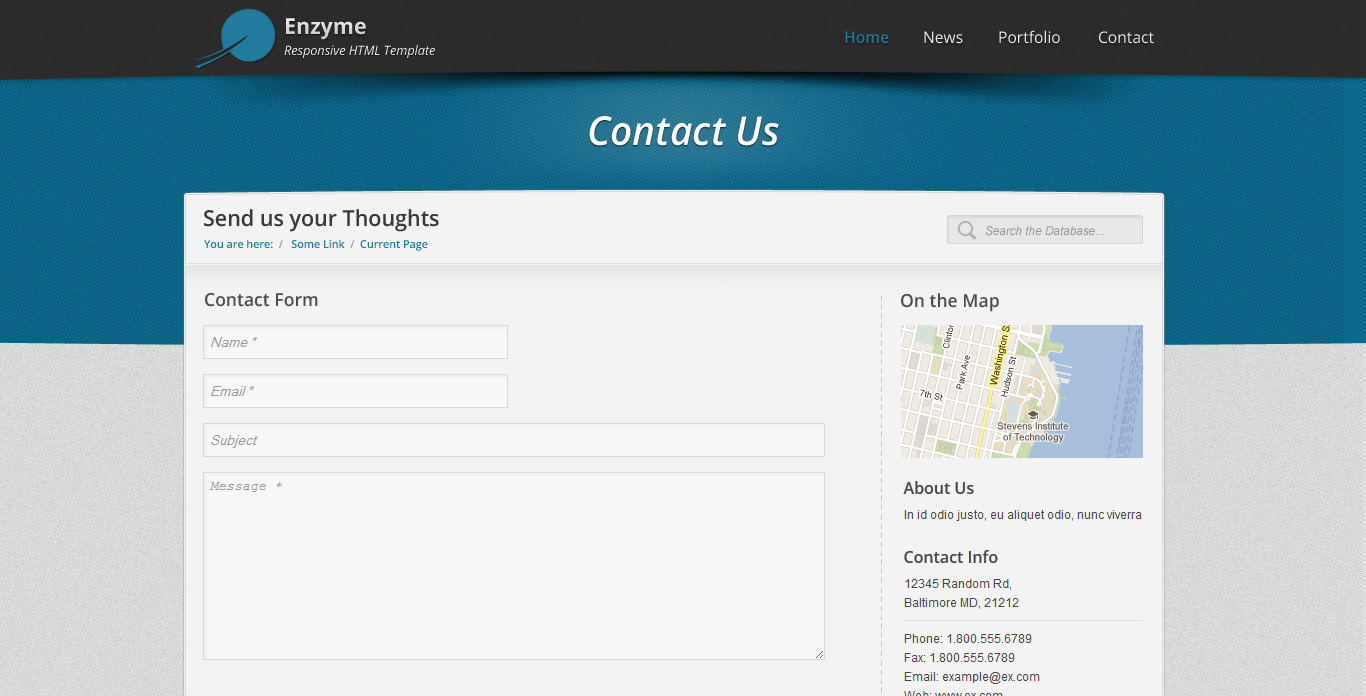
<style>
.page{position:relative;width:1366px;height:696px;background:#f4f3f3}
.page>*{position:absolute;margin:0}
.t1{font:22px "OpenSans-Bold";color:#d9d9d9}
.t2{font:16px "OpenSans";color:#efefef}
.t3{font:16px "OpenSans-Semibold";color:#217b9d}
.t4{font:13px "OpenSans-Italic";color:#efefef}
.t5{font:40px "OpenSans-SemiboldItalic";color:#ffffff}
.t6{font:22px "OpenSans-Semibold";color:#393939}
.t7{font:12px "Arial-ItalicMT";color:#979797}
.t8{font:11px "OpenSans-Semibold";color:#217b9d}
.t9{font:11px "OpenSans-Semibold";color:#949494}
.t10{font:18px "OpenSans-Semibold";color:#4c4c4c}
</style>
<div class="page">
<p class="t1" style="left:286px;top:18px;width:80px;height:22px">Enzyme</p>
<p class="t2" style="left:999px;top:30px;width:61px;height:14px">Portfolio</p>
<p class="t3" style="left:845px;top:31px;width:44px;height:13px">Home</p>
<p class="t2" style="left:924px;top:31px;width:39px;height:13px">News</p>
<p class="t2" style="left:1099px;top:31px;width:55px;height:13px">Contact</p>
<p class="t4" style="left:284px;top:45px;width:151px;height:13px">Responsive HTML Template</p>
<p class="t5" style="left:589px;top:116px;width:190px;height:30px">Contact Us</p>
<p class="t6" style="left:204px;top:209px;width:235px;height:23px">Send us your Thoughts</p>
<p class="t7" style="left:986px;top:226px;width:118px;height:10px">Search the Database...</p>
<p class="t8" style="left:204px;top:239px;width:224px;height:12px">You are here:  <span class="t9">/   </span>Some Link  <span class="t9">/  </span>Current Page</p>
<p class="t10" style="left:205px;top:293px;width:113px;height:14px">Contact Form</p>
<p class="t10" style="left:901px;top:293px;width:98px;height:19px">On the Map</p>
</div>
